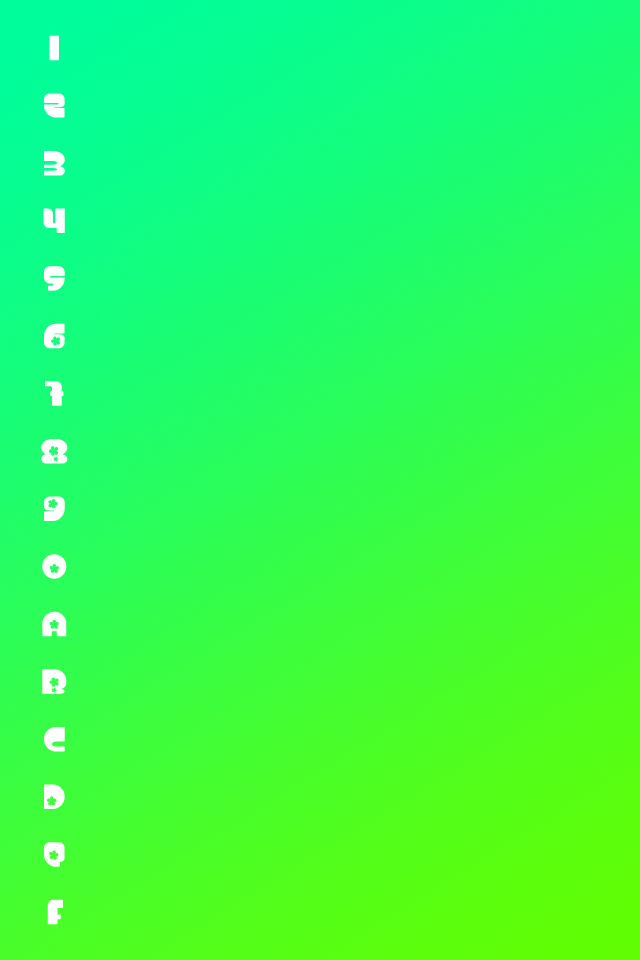
<style>
.page{position:relative;width:640px;height:960px}
.page>*{position:absolute;margin:0}
.t1{font:48px "Chick";color:#ffffff}
</style>
<div class="page">
<p class="t1" style="left:41px;top:35px;width:27px;height:890px;text-align:center">1<br>2<br>3<br>4<br>5<br>6<br>7<br>8<br>9<br>0<br>A<br>B<br>C<br>D<br>E<br>F</p>
</div>
